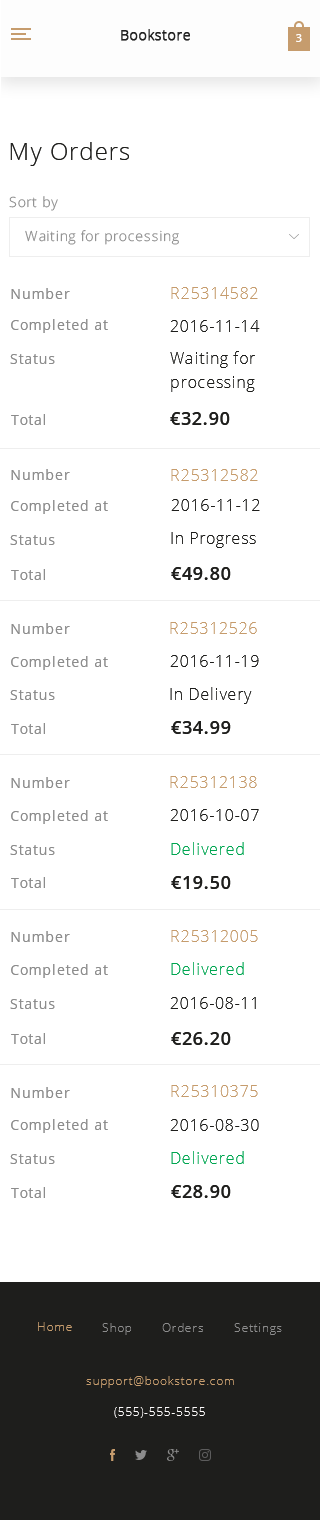
<style>
.page{position:relative;width:320px;height:1520px;background:#ffffff}
.page>*{position:absolute;margin:0}
.t1{font:24px "OpenSans-Light";letter-spacing:0.05em;color:#1e1e1c}
.t2{font:14px "OpenSans-Light";letter-spacing:0.05em;color:#8c8c8c}
.t3{font:14px "OpenSans";letter-spacing:0.05em;color:#8c8c8c}
.t4{font:16px "OpenSans-Light";letter-spacing:0.05em;color:#c69c6d}
.t5{font:16px "OpenSans-Light";letter-spacing:0.05em;color:#1e1e1c}
.t6{font:16px/24px "OpenSans-Light";letter-spacing:0.05em;color:#1e1e1c}
.t7{font:18px "OpenSans-Semibold";letter-spacing:0.05em;color:#1e1e1c}
.t8{font:16px "OpenSans-Light";letter-spacing:0.05em;color:#00a651}
</style>
<div class="page">
<p class="t1" style="left:10px;top:142px;width:119px;height:24px">My Orders</p>
<p class="t2" style="left:9px;top:196px;width:49px;height:15px">Sort by</p>
<p class="t2" style="left:25px;top:230px;width:154px;height:15px">Waiting for processing</p>
<p class="t3" style="left:11px;top:288px;width:59px;height:11px">Number</p>
<p class="t4" style="left:171px;top:287px;width:87px;height:12px">R25314582</p>
<p class="t3" style="left:11px;top:319px;width:97px;height:14px">Completed at</p>
<p class="t5" style="left:170px;top:320px;width:90px;height:12px">2016-11-14</p>
<p class="t6" style="left:170px;top:351px;width:85px;height:41px">Waiting for processing</p>
<p class="t3" style="left:10px;top:354px;width:45px;height:10px">Status</p>
<p class="t3" style="left:11px;top:414px;width:34px;height:11px">Total</p>
<p class="t7" style="left:170px;top:412px;width:60px;height:13px">€32.90</p>
<p class="t3" style="left:11px;top:469px;width:59px;height:11px">Number</p>
<p class="t4" style="left:171px;top:469px;width:87px;height:12px">R25312582</p>
<p class="t3" style="left:11px;top:500px;width:97px;height:14px">Completed at</p>
<p class="t5" style="left:171px;top:499px;width:89px;height:12px">2016-11-12</p>
<p class="t5" style="left:171px;top:532px;width:85px;height:16px">In Progress</p>
<p class="t3" style="left:10px;top:535px;width:45px;height:10px">Status</p>
<p class="t3" style="left:11px;top:569px;width:34px;height:11px">Total</p>
<p class="t7" style="left:171px;top:567px;width:60px;height:13px">€49.80</p>
<p class="t3" style="left:11px;top:623px;width:59px;height:11px">Number</p>
<p class="t4" style="left:170px;top:622px;width:87px;height:12px">R25312526</p>
<p class="t3" style="left:11px;top:656px;width:97px;height:14px">Completed at</p>
<p class="t5" style="left:170px;top:655px;width:89px;height:12px">2016-11-19</p>
<p class="t5" style="left:170px;top:687px;width:82px;height:17px">In Delivery</p>
<p class="t3" style="left:10px;top:690px;width:45px;height:10px">Status</p>
<p class="t3" style="left:11px;top:723px;width:34px;height:11px">Total</p>
<p class="t7" style="left:171px;top:721px;width:60px;height:13px">€34.99</p>
<p class="t3" style="left:11px;top:777px;width:59px;height:11px">Number</p>
<p class="t4" style="left:170px;top:776px;width:87px;height:12px">R25312138</p>
<p class="t5" style="left:170px;top:809px;width:89px;height:12px">2016-10-07</p>
<p class="t3" style="left:11px;top:810px;width:97px;height:14px">Completed at</p>
<p class="t3" style="left:10px;top:845px;width:45px;height:10px">Status</p>
<p class="t8" style="left:171px;top:842px;width:73px;height:13px">Delivered</p>
<p class="t3" style="left:11px;top:877px;width:34px;height:11px">Total</p>
<p class="t7" style="left:171px;top:876px;width:60px;height:13px">€19.50</p>
<p class="t3" style="left:11px;top:931px;width:59px;height:11px">Number</p>
<p class="t4" style="left:171px;top:930px;width:87px;height:12px">R25312005</p>
<p class="t3" style="left:11px;top:964px;width:97px;height:14px">Completed at</p>
<p class="t8" style="left:171px;top:962px;width:73px;height:13px">Delivered</p>
<p class="t3" style="left:10px;top:999px;width:45px;height:10px">Status</p>
<p class="t5" style="left:170px;top:997px;width:86px;height:12px">2016-08-11</p>
<p class="t3" style="left:11px;top:1033px;width:34px;height:11px">Total</p>
<p class="t7" style="left:171px;top:1032px;width:60px;height:13px">€26.20</p>
<p class="t4" style="left:171px;top:1085px;width:87px;height:12px">R25310375</p>
<p class="t3" style="left:11px;top:1087px;width:59px;height:11px">Number</p>
<p class="t3" style="left:11px;top:1119px;width:97px;height:14px">Completed at</p>
<p class="t5" style="left:170px;top:1119px;width:89px;height:12px">2016-08-30</p>
<p class="t3" style="left:10px;top:1154px;width:45px;height:10px">Status</p>
<p class="t8" style="left:171px;top:1151px;width:73px;height:13px">Delivered</p>
<p class="t3" style="left:11px;top:1187px;width:34px;height:11px">Total</p>
<p class="t7" style="left:171px;top:1185px;width:60px;height:13px">€28.90</p>
</div>
